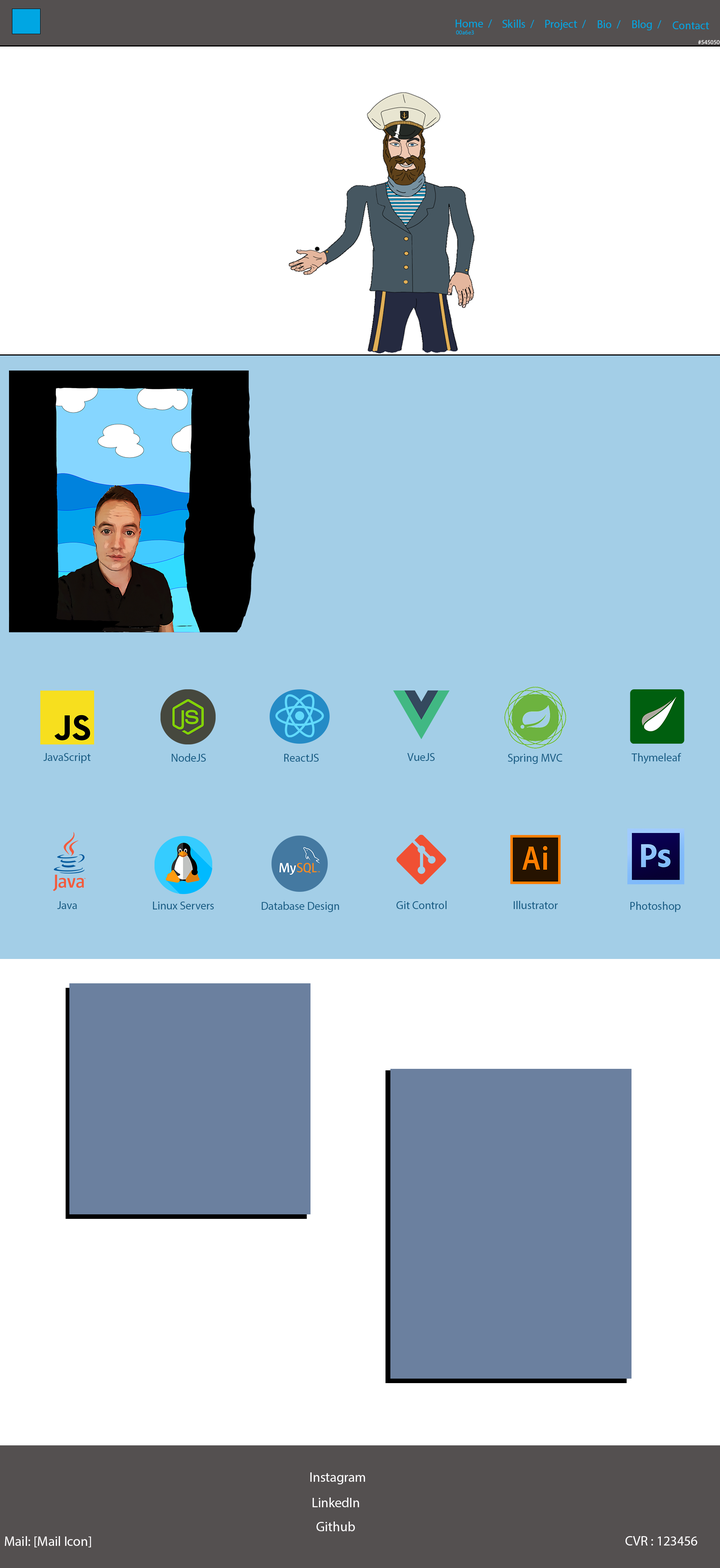
<style>
.page{position:relative;width:720px;height:1568px;background:#ffffff}
.page>*{position:absolute;margin:0}
.t1{font:11.3px "MyriadPro-Regular";color:#00a6e3}
.t2{font:6px "MyriadPro-Regular";color:#00a6e3}
.t3{font:6px "MyriadPro-Regular";color:#ffffff}
.t4{font:11.3px "MyriadPro-Regular";color:#175c84}
.t5{font:13.5px "MyriadPro-Regular";color:#fffeff}
</style>
<div class="page">
<p class="t1" style="left:456px;top:20px;width:36px;height:8px">Home  /</p>
<p class="t1" style="left:502px;top:20px;width:32px;height:8px">Skills  /</p>
<p class="t1" style="left:545px;top:20px;width:41px;height:10px">Project  /</p>
<p class="t1" style="left:598px;top:20px;width:23px;height:9px">Bio  /</p>
<p class="t1" style="left:632px;top:20px;width:30px;height:10px">Blog  /</p>
<p class="t1" style="left:673px;top:21px;width:36px;height:8px">Contact</p>
<p class="t2" style="left:456px;top:30px;width:18px;height:5px">00a6e3</p>
<p class="t3" style="left:698px;top:40px;width:22px;height:4px">#545050</p>
<p class="t4" style="left:43px;top:753px;width:48px;height:10px">JavaScript</p>
<p class="t4" style="left:172px;top:753px;width:34px;height:9px">NodeJS</p>
<p class="t4" style="left:284px;top:754px;width:35px;height:8px">ReactJS</p>
<p class="t4" style="left:407px;top:753px;width:28px;height:8px">VueJS</p>
<p class="t4" style="left:508px;top:754px;width:55px;height:10px">Spring MVC</p>
<p class="t4" style="left:632px;top:753px;width:49px;height:11px">Thymeleaf</p>
<p class="t4" style="left:57px;top:901px;width:20px;height:8px">Java</p>
<p class="t4" style="left:153px;top:902px;width:61px;height:7px">Linux Servers</p>
<p class="t4" style="left:262px;top:902px;width:77px;height:10px">Database Design</p>
<p class="t4" style="left:396px;top:901px;width:51px;height:8px">Git Control</p>
<p class="t4" style="left:514px;top:901px;width:44px;height:8px">Illustrator</p>
<p class="t4" style="left:630px;top:902px;width:51px;height:10px">Photoshop</p>
<p class="t5" style="left:310px;top:1472px;width:55px;height:12px">Instagram</p>
<p class="t5" style="left:312px;top:1497px;width:47px;height:10px">LinkedIn</p>
<p class="t5" style="left:317px;top:1521px;width:38px;height:10px">Github</p>
<p class="t5" style="left:5px;top:1536px;width:86px;height:11px">Mail: [Mail Icon]</p>
<p class="t5" style="left:626px;top:1536px;width:72px;height:9px">CVR : 123456</p>
</div>
